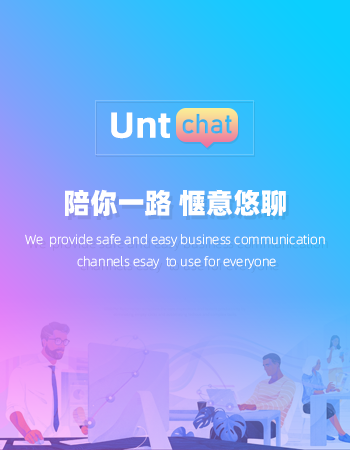
<style>
.page{position:relative;width:350px;height:450px}
.page>*{position:absolute;margin:0}
.t1{font:36px "AlibabaPuHuiTiB";color:#ffffff}
.t2{font:28px "AlibabaPuHuiTiH";color:#ffffff}
.t3{font:13px/22px "AlibabaPuHuiTiL";color:#ffffff}
</style>
<div class="page">
<p class="t1" style="left:111px;top:112px;width:60px;height:27px">Unt</p>
<p class="t2" style="left:65px;top:189px;width:221px;height:28px">陪你一路 惬意悠聊</p>
<p class="t3" style="left:25px;top:234px;width:300px;height:35px;text-align:center">We  provide safe and easy business communication <br>channels esay  to use for everyone</p>
</div>
